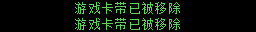
<style>
.page{position:relative;width:256px;height:32px;background:#000000}
.page>*{position:absolute;margin:0}
.t1{font:13.3px "Zfull-GB";color:#63cf63}
</style>
<div class="page">
<p class="t1" style="left:75px;top:2px;width:105px;height:12px">游戏卡带已被移除</p>
<p class="t1" style="left:75px;top:18px;width:105px;height:12px">游戏卡带已被移除</p>
</div>
